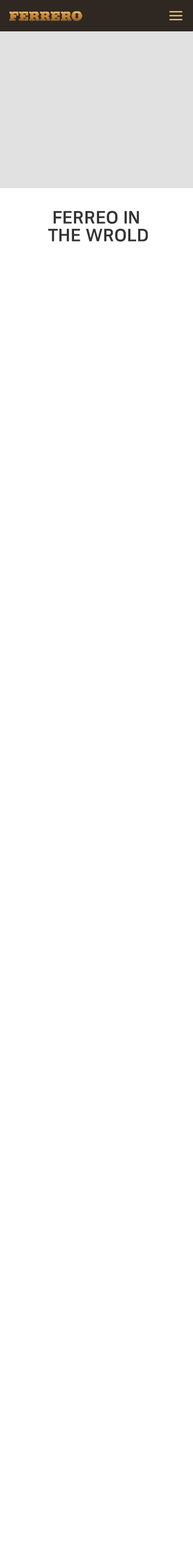
<style>
.page{position:relative;width:193px;height:1568px;background:#ffffff}
.page>*{position:absolute;margin:0}
.t1{font:17.4px/17.4px "NanumSquareEB";color:#333333}
</style>
<div class="page">
<p class="t1" style="left:48px;top:211px;width:100px;height:31px;text-align:center">FERREO IN<br> THE WROLD</p>
</div>
